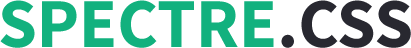
<style>
.page{position:relative;width:411px;height:48px;background:#ffffff}
.page>*{position:absolute;margin:0}
.t1{font:70px "SourceSansPro-Bold";color:#12b17e;text-transform:uppercase}
.t2{font:70px "SourceSansPro-Bold";color:#282830;text-transform:uppercase}
</style>
<div class="page">
<p class="t1" style="left:0px;top:0px;width:411px;height:48px">spectre<span class="t2">.css</span></p>
</div>
